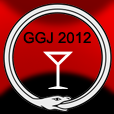
<style>
.page{position:relative;width:114px;height:114px}
.page>*{position:absolute;margin:0}
.t1{font:15px "ArialMT";color:#000000}
</style>
<div class="page">
<p class="t1" style="left:23px;top:32px;width:68px;height:12px">GGJ 2012</p>
</div>
